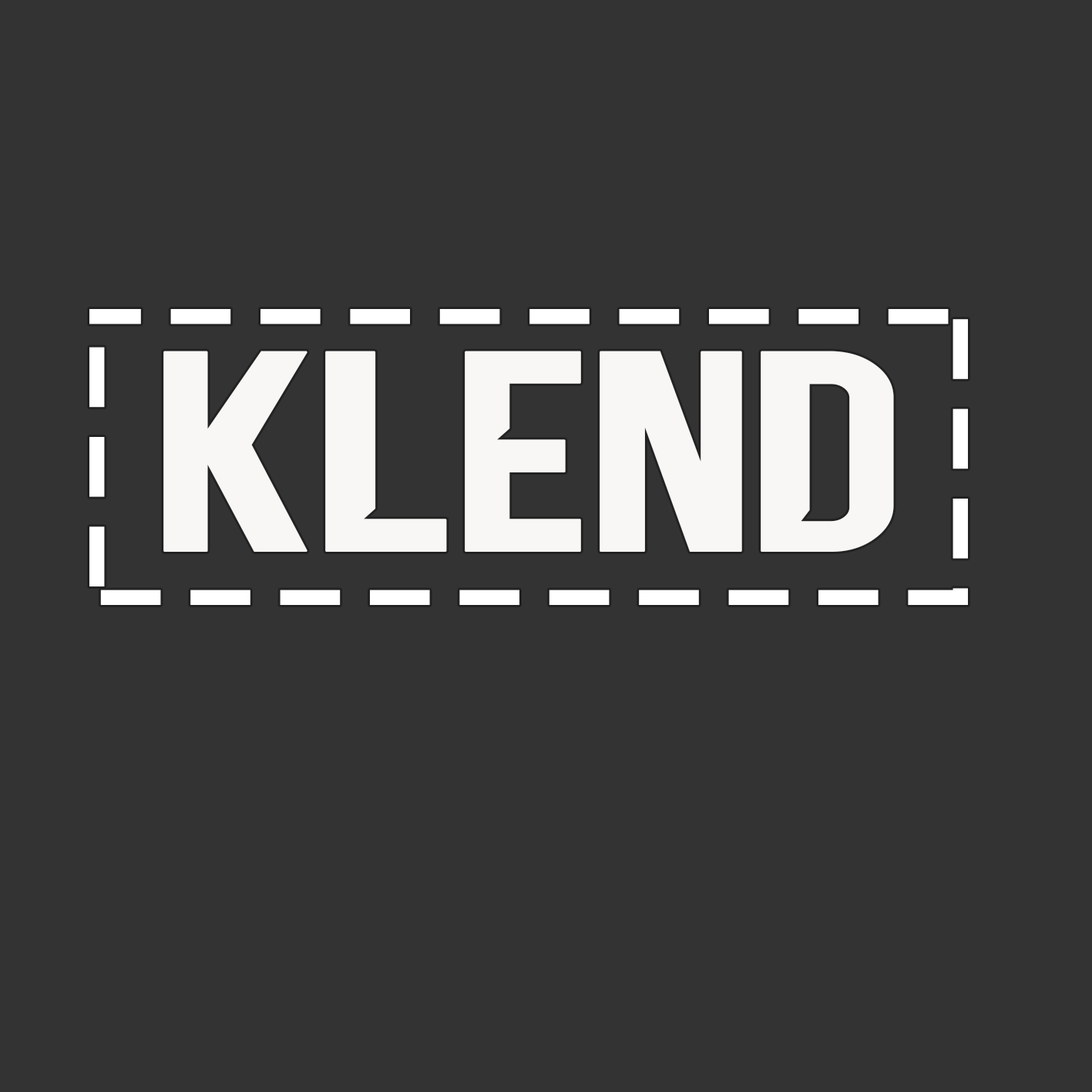
<style>
.page{position:relative;width:1092px;height:1092px;background:#333333}
.page>*{position:absolute;margin:0}
.t1{font:285.1px "FC-Liverpool--Club-2019";letter-spacing:-0.025em;color:#f8f7f5;font-weight:bold;scale:1.35 1}
</style>
<div class="page">
<p class="t1" style="left:163px;top:351px;width:731px;height:201px">klend</p>
</div>
